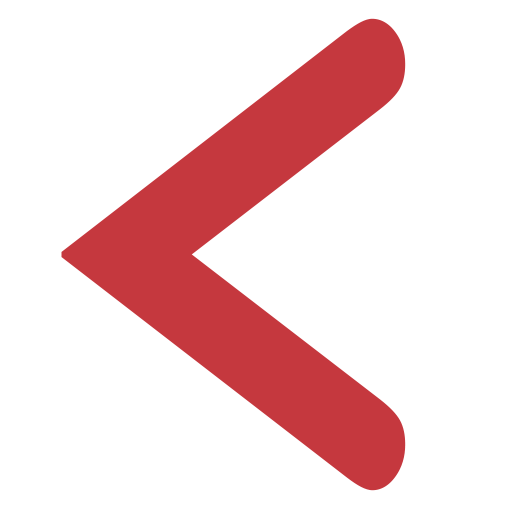
<style>
.page{position:relative;width:512px;height:512px;background:#ffffff}
.page>*{position:absolute;margin:0}
.t1{font:821.8px "CourierNewPS-BoldMT";color:#c5383e;font-weight:bold;scale:0.72 1}
</style>
<div class="page">
<p class="t1" style="left:61px;top:18px;width:345px;height:473px">&lt;</p>
</div>
